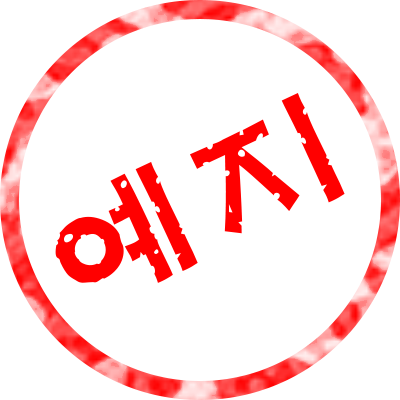
<style>
.page{position:relative;width:400px;height:400px;background:#ffffff}
.page>*{position:absolute;margin:0}
.t1{font:150px "H2mkpB";letter-spacing:0.1em;color:#ff0000}
</style>
<div class="page">
<p class="t1" style="left:55px;top:93px;width:290px;height:190px;rotate:-25deg">예지</p>
</div>
